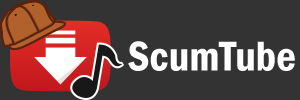
<style>
.page{position:relative;width:300px;height:100px;background:#333333}
.page>*{position:absolute;margin:0}
.t1{font:43.1px "FranklinGothic-DemiCond";color:#ffffff}
</style>
<div class="page">
<p class="t1" style="left:128px;top:41px;width:167px;height:30px">ScumTube</p>
</div>
